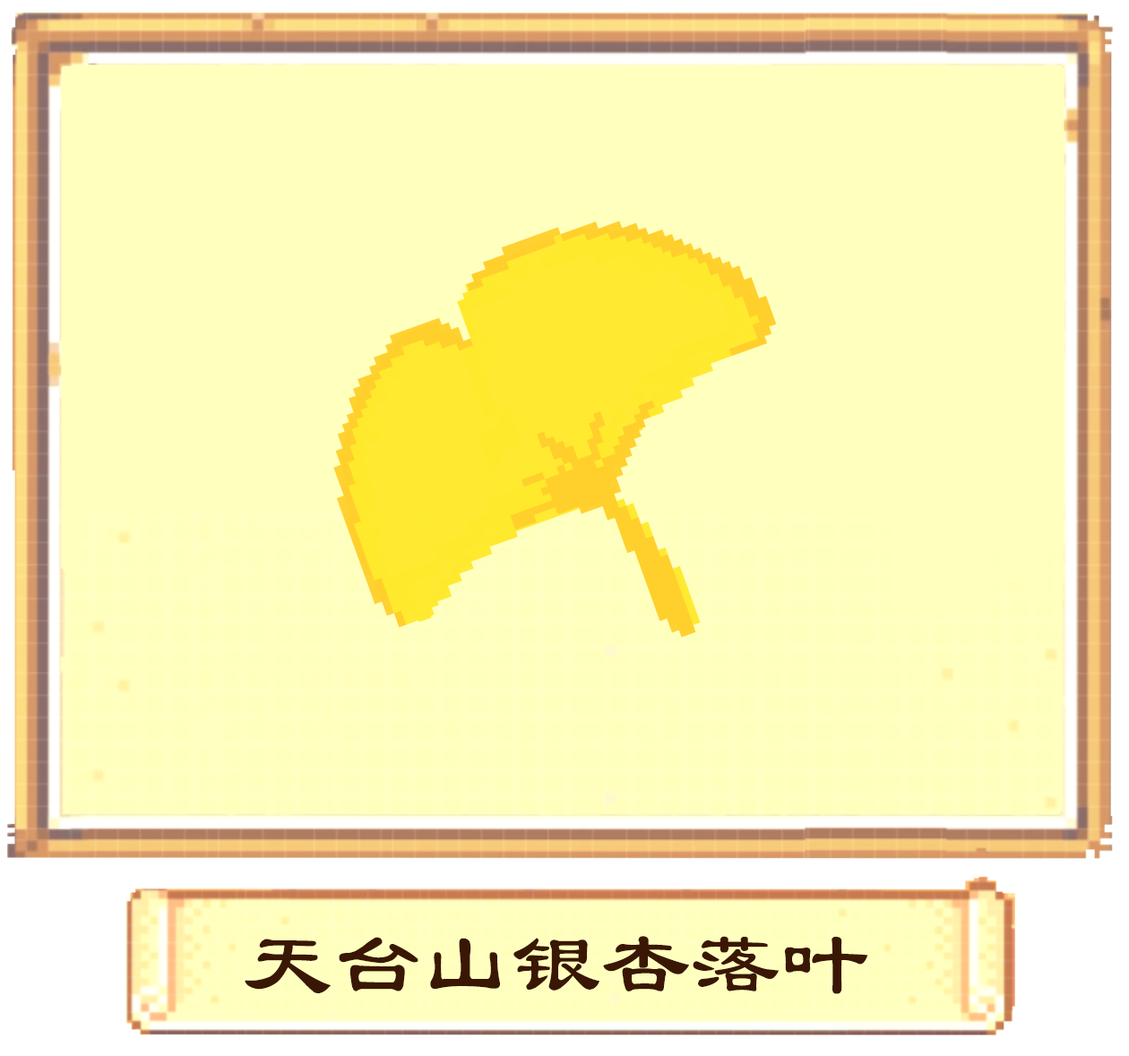
<style>
.page{position:relative;width:1129px;height:1056px;background:#ffffbe}
.page>*{position:absolute;margin:0}
.t1{font:89.6px "LiSu";color:#391704}
</style>
<div class="page">
<p class="t1" style="left:245px;top:936px;width:624px;height:58px">天台山银杏落叶</p>
</div>
